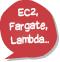
<style>
.page{position:relative;width:60px;height:62px;background:#c73d42}
.page>*{position:absolute;margin:0}
.t1{font:11.6px "SuplexmentaryComicNC";color:#ffffff;scale:0.8 1}
</style>
<div class="page">
<p class="t1" style="left:9px;top:8px;width:40px;height:37px;text-align:center;rotate:-2deg">EC2, <br>Fargate, <br>Lambda...</p>
</div>
